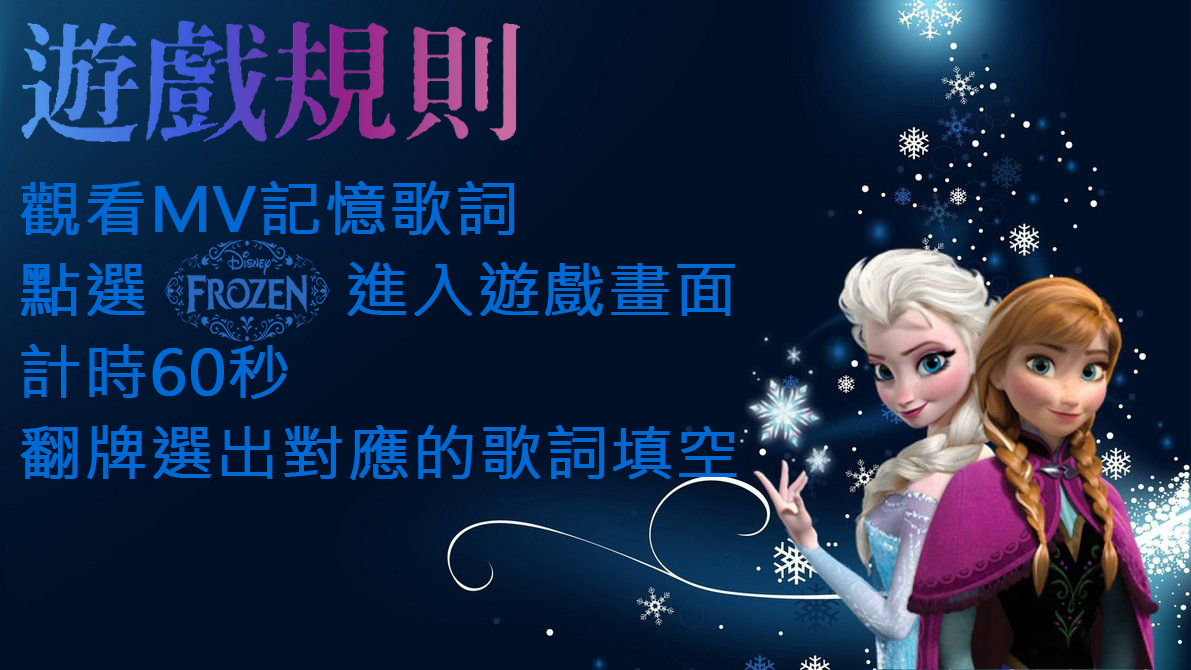
<style>
.page{position:relative;width:1191px;height:670px;background:#001027}
.page>*{position:absolute;margin:0}
.t1{font:60.4px/81.5px "MicrosoftJhengHeiUIRegular";color:#006ad4;font-weight:bold;scale:1.06 1}
.t2{font:81.5px/113.1px "MicrosoftJhengHeiUIRegular";color:#006ad4;font-weight:bold;scale:1.06 1}
</style>
<div class="page">
<p class="t1" style="left:20px;top:181px;width:717px;height:299px"><span class="t2"><br></span>觀看MV記憶歌詞<br>點選           進入遊戲畫面<br>計時60秒<br>翻牌選出對應的歌詞填空</p>
</div>
